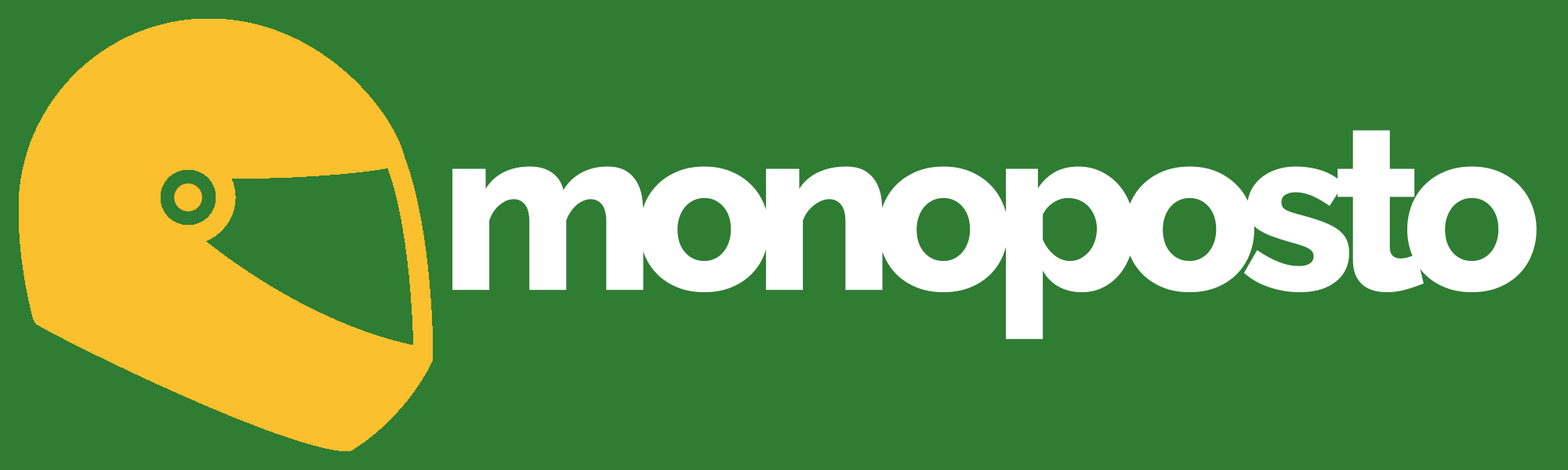
<style>
.page{position:relative;width:1568px;height:470px;background:#2e7d32}
.page>*{position:absolute;margin:0}
.t1{font:230.3px "Raleway-ExtraBold";letter-spacing:-0.09em;color:#ffffff}
</style>
<div class="page">
<p class="t1" style="left:452px;top:130px;width:1085px;height:209px">monoposto</p>
</div>
